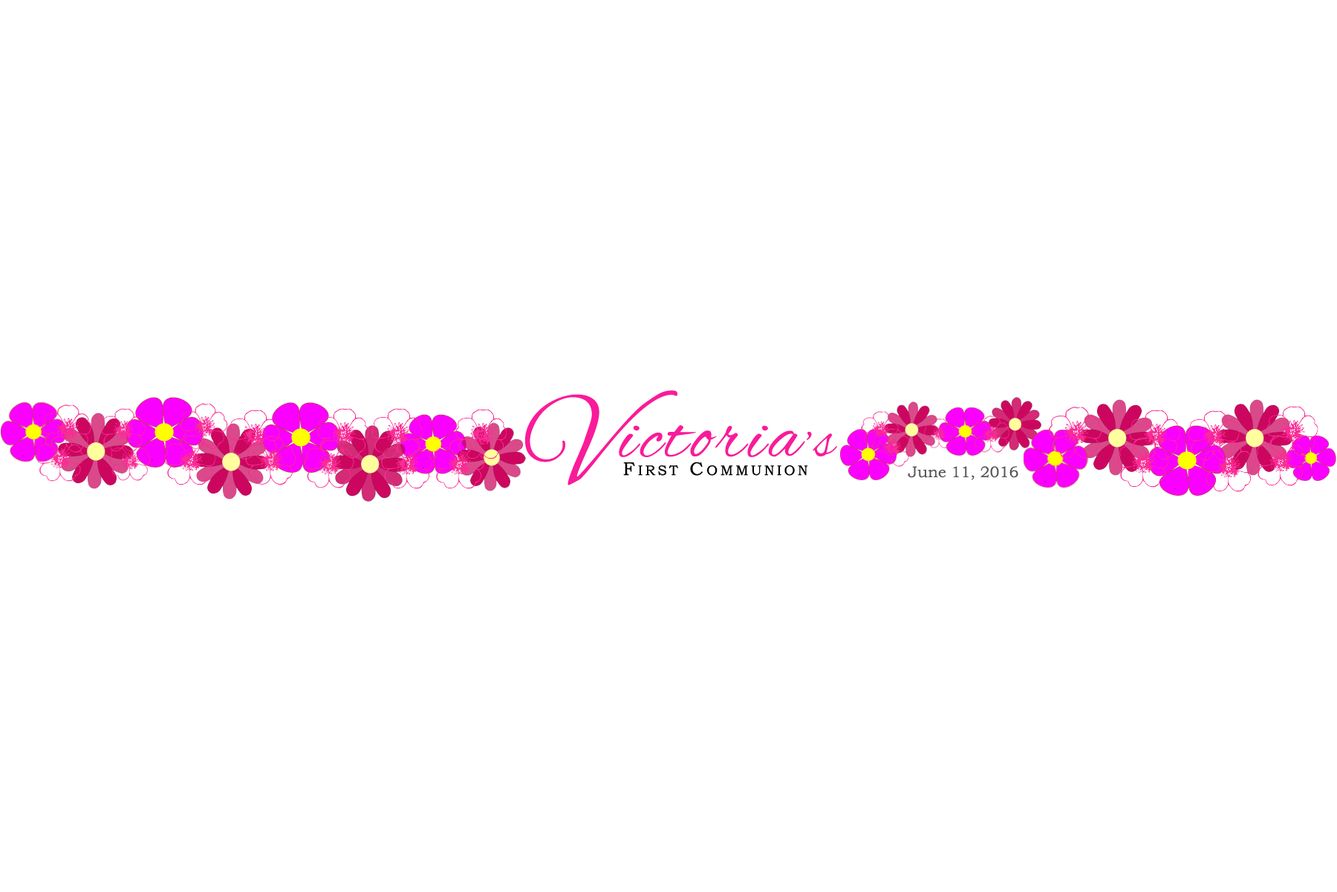
<style>
.page{position:relative;width:1337px;height:892px;background:#ffffff}
.page>*{position:absolute;margin:0}
.t1{font:123.8px "AlexBrush-Regular";letter-spacing:0.05em;color:#f91b99}
.t2{font:74.3px "AlexBrush-Regular";letter-spacing:0.05em;color:#f91b99}
.t3{font:55.7px "AlexBrush-Regular";letter-spacing:0.05em;color:#f91b99}
.t4{font:13.9px "BookmanOldStyle";letter-spacing:0.175em;color:#010101}
.t5{font:18.6px "BookmanOldStyle";letter-spacing:0.175em;color:#010101}
.t6{font:15.5px "BookmanOldStyle";color:#585858}
</style>
<div class="page">
<p class="t1" style="left:525px;top:390px;width:153px;height:95px">V</p>
<p class="t2" style="left:619px;top:425px;width:218px;height:32px">ictoria<span class="t3">’s</span></p>
<p class="t4" style="left:623px;top:461px;width:185px;height:15px"><span class="t5">F</span>IRST<span class="t5"> C</span>OMMUNION</p>
<p class="t6" style="left:908px;top:466px;width:111px;height:14px">June 11, 2016</p>
</div>
